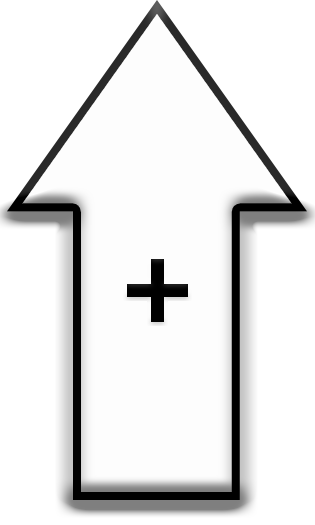
<style>
.page{position:relative;width:315px;height:525px;background:#ffffff}
.page>*{position:absolute;margin:0}
.t1{font:125px "FranklinGothic-Demi";color:#000000}
</style>
<div class="page">
<p class="t1" style="left:127px;top:259px;width:61px;height:63px">+</p>
</div>
